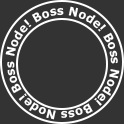
<style>
.page{position:relative;width:124px;height:124px;background:#333333}
.page>*{position:absolute;margin:0}
.t1{font:12px "Verdana-Bold";color:#ffffff;scale:0.96 1}
</style>
<div class="page">
<p class="t1" style="left:5px;top:6px;width:115px;height:114px;text-align:center">Boss Node! Boss Node! Boss Node! Boss Node!</p>
</div>
